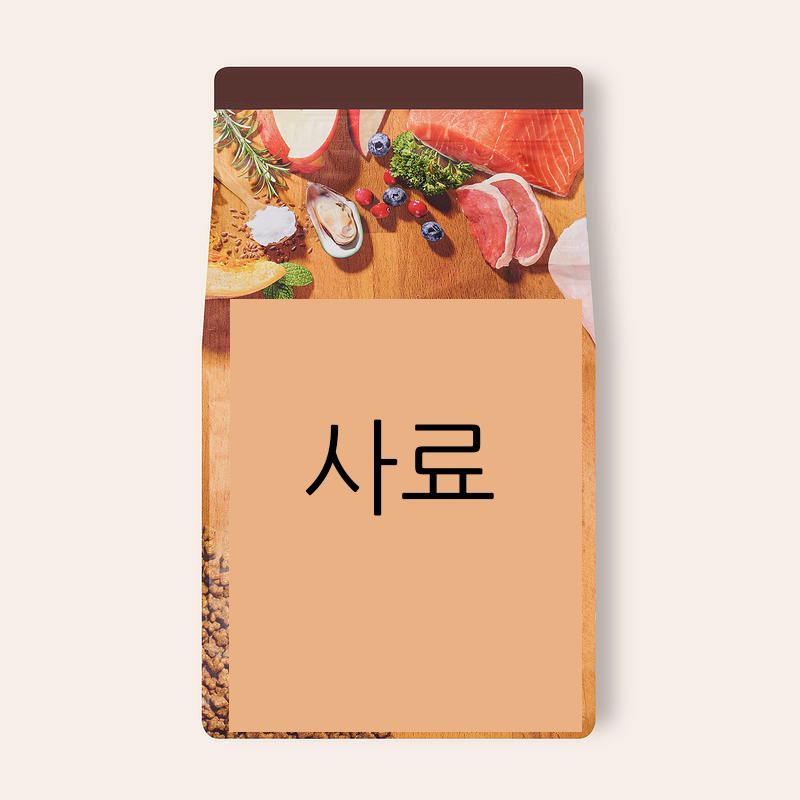
<style>
.page{position:relative;width:800px;height:800px;background:#f7eee9}
.page>*{position:absolute;margin:0}
.t1{font:104.2px "NanumGothicOTF";color:#000000}
</style>
<div class="page">
<p class="t1" style="left:305px;top:419px;width:189px;height:97px">사료</p>
</div>
